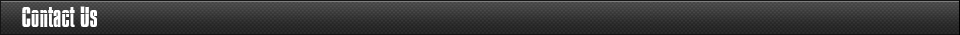
<style>
.page{position:relative;width:960px;height:35px}
.page>*{position:absolute;margin:0}
.t1{font:25px "Impossible";color:#ffffff}
</style>
<div class="page">
<p class="t1" style="left:22px;top:6px;width:75px;height:21px">Contact Us</p>
</div>
